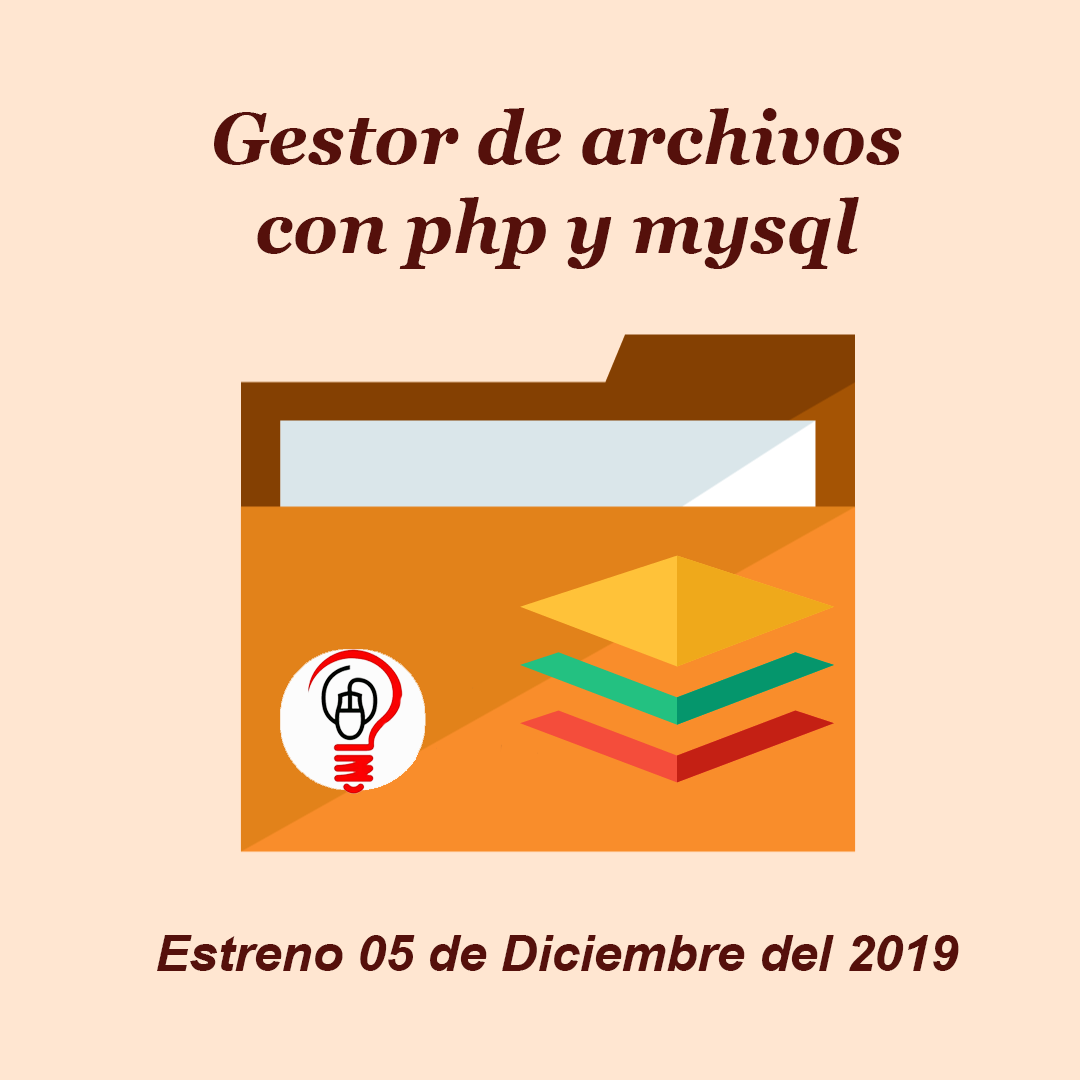
<style>
.page{position:relative;width:1080px;height:1080px;background:#ffe6d1}
.page>*{position:absolute;margin:0}
.t1{font:74.5px "Georgia-BoldItalic";color:#55100b;scale:0.95 1}
.t2{font:50.2px "Arial-BoldItalicMT";color:#55100b}
</style>
<div class="page">
<p class="t1" style="left:214px;top:108px;width:688px;height:161px;text-align:center">Gestor de archivos <br>con php y mysql</p>
<p class="t2" style="left:157px;top:935px;width:802px;height:36px">Estreno 05 de Diciembre del 2019</p>
</div>
